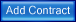
<style>
.page{position:relative;width:76px;height:22px}
.page>*{position:absolute;margin:0}
.t1{font:11px "MicrosoftSansSerif";color:#fefffe}
</style>
<div class="page">
<p class="t1" style="left:6px;top:5px;width:64px;height:10px">Add Contract</p>
</div>
